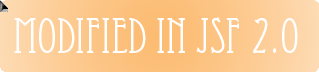
<style>
.page{position:relative;width:319px;height:72px}
.page>*{position:absolute;margin:0}
.t1{font:48px "Eccentric";color:#ffffff}
</style>
<div class="page">
<p class="t1" style="left:14px;top:17px;width:284px;height:36px">Modified in JSF 2.0</p>
</div>
